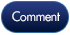
<style>
.page{position:relative;width:70px;height:35px}
.page>*{position:absolute;margin:0}
.t1{font:18.1px "PSLxKittithada-Bold";color:#fffefe}
</style>
<div class="page">
<p class="t1" style="left:12px;top:11px;width:48px;height:11px">Comment</p>
</div>
